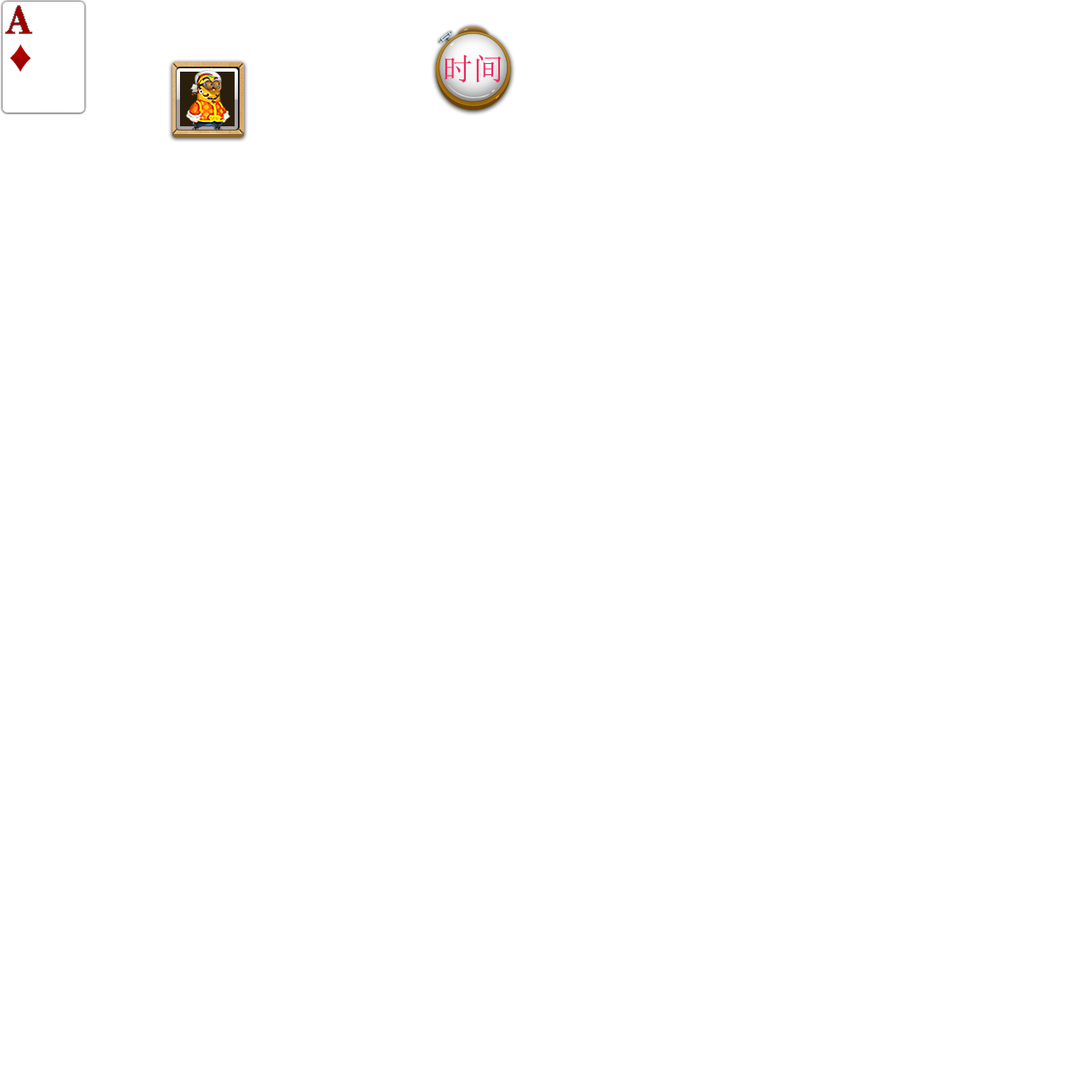
<style>
.page{position:relative;width:1092px;height:1092px;background:#ffffff}
.page>*{position:absolute;margin:0}
.t1{font:30.7px "SimSun";color:#ec275f}
</style>
<div class="page">
<p class="t1" style="left:444px;top:55px;width:58px;height:28px">时间</p>
</div>
